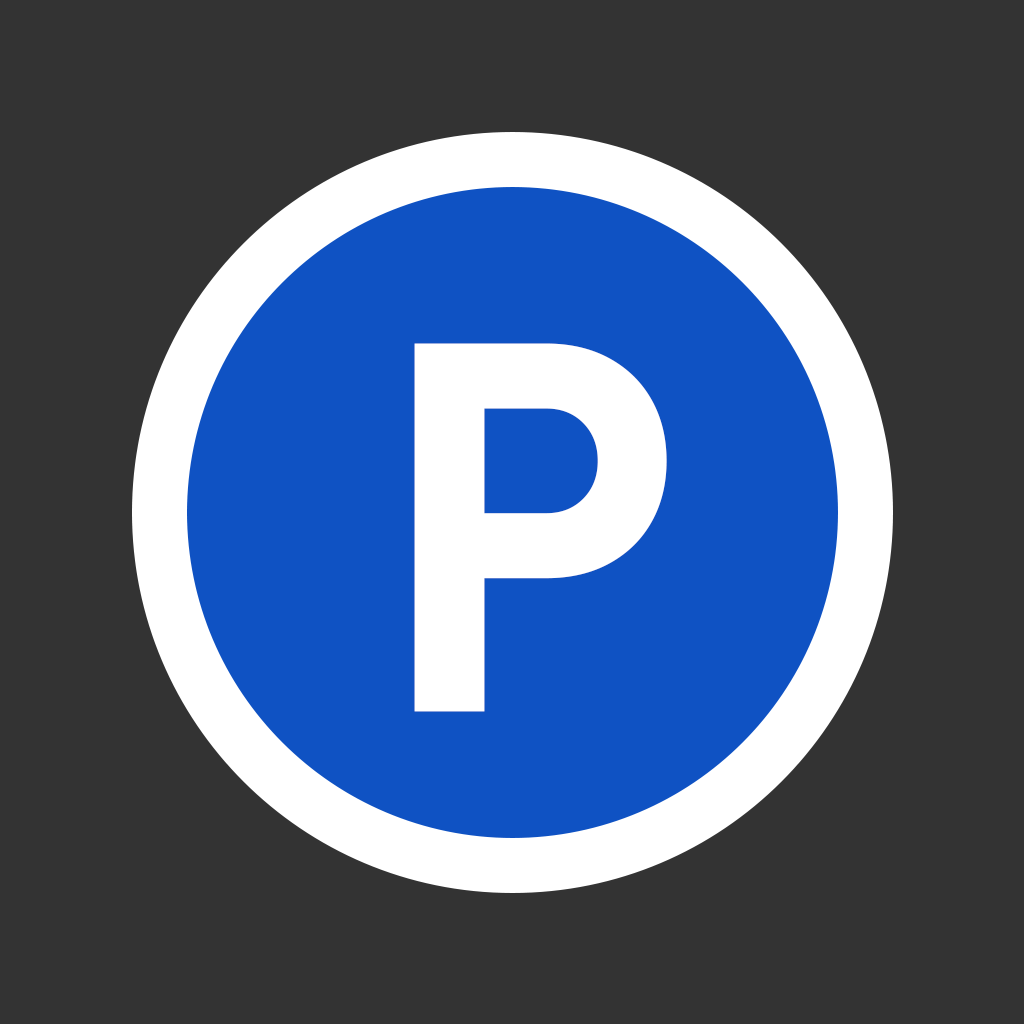
<style>
.page{position:relative;width:1024px;height:1024px;background:#333333}
.page>*{position:absolute;margin:0}
.t1{font:480.7px "Lenovo-XiaoxinChaokuGB";color:#ffffff}
</style>
<div class="page">
<p class="t1" style="left:414px;top:343px;width:253px;height:369px">P</p>
</div>
